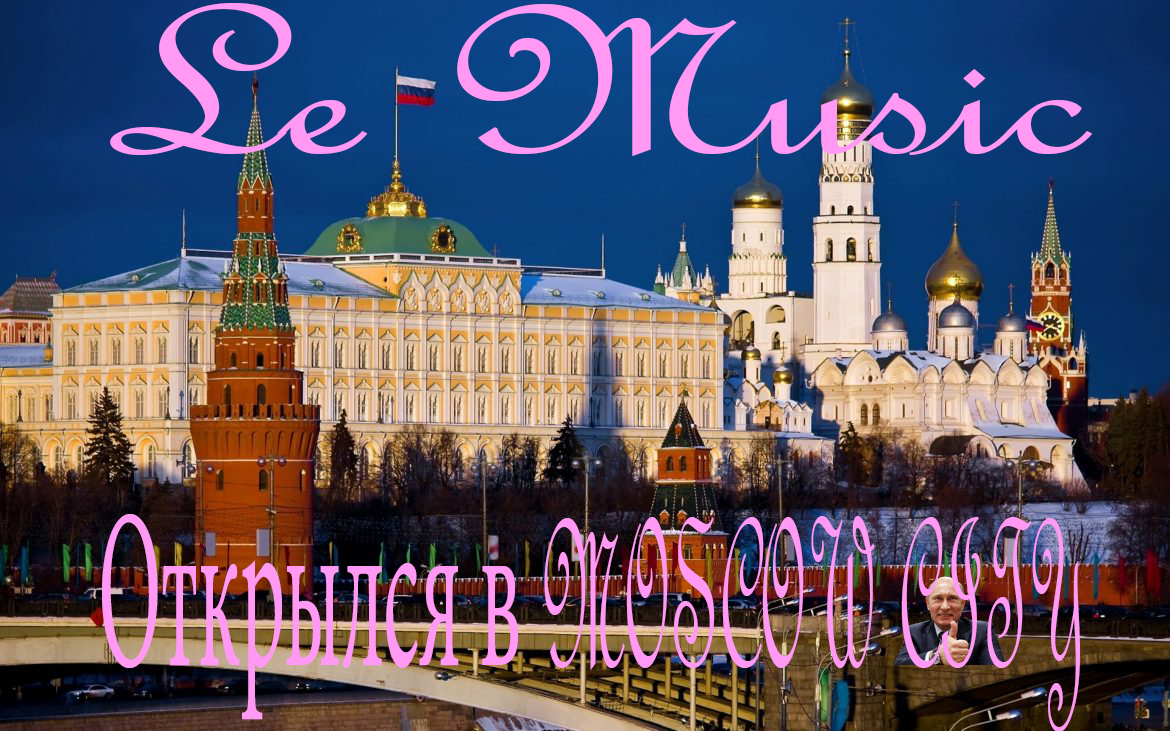
<style>
.page{position:relative;width:1170px;height:731px}
.page>*{position:absolute;margin:0}
.t1{font:227.3px "FrenchScriptMT";color:#ff99f3;scale:1.41 1}
.t2{font:227.3px "FrenchScriptMT";color:#ff99f3;scale:0.37 1}
.t3{font:227.3px "MinionPro-Regular";color:#ff99f3;scale:0.37 1}
</style>
<div class="page">
<p class="t1" style="left:110px;top:3px;width:983px;height:153px">Le Music</p>
<p class="t2" style="left:102px;top:514px;width:978px;height:218px"><span class="t3">Открылся в </span>MOSCOW CITY</p>
</div>
